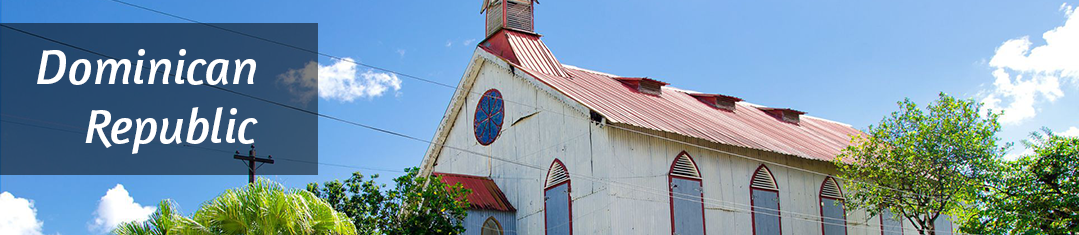
<style>
.page{position:relative;width:1079px;height:235px}
.page>*{position:absolute;margin:0}
.t1{font:49px "Amaranth-Italic";color:#ffffff}
</style>
<div class="page">
<p class="t1" style="left:37px;top:49px;width:221px;height:105px">Dominican <br> Republic</p>
</div>
